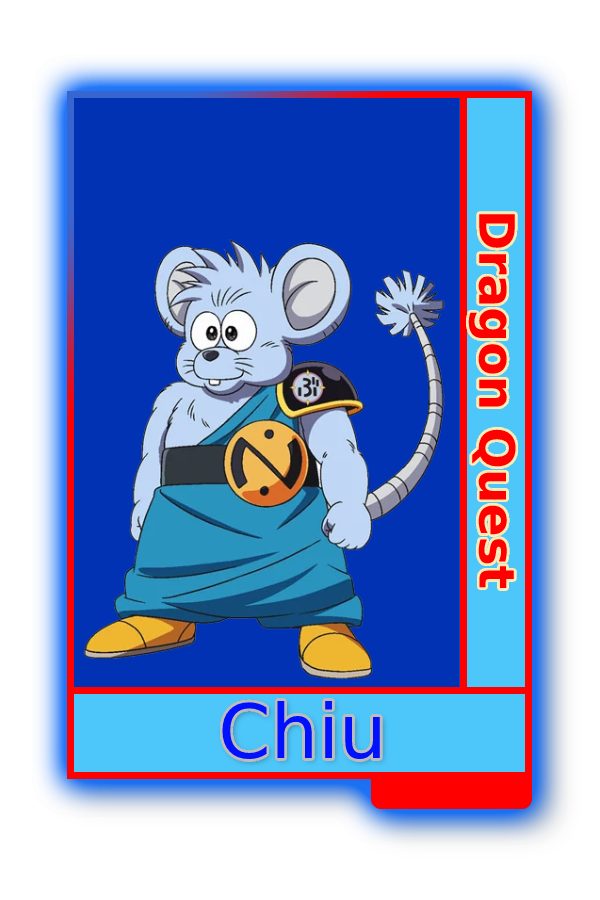
<style>
.page{position:relative;width:600px;height:900px;background:#0032b3}
.page>*{position:absolute;margin:0}
.t1{font:48.8px "MADETOMMY-Bold";color:#ff0000}
.t2{font:75px "CoolveticaRg-Regular";color:#0011fd}
</style>
<div class="page">
<p class="t1" style="left:468px;top:214px;width:48px;height:374px;rotate:90deg">Dragon Quest</p>
<p class="t2" style="left:222px;top:701px;width:158px;height:59px">Chiu</p>
</div>
